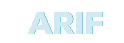
<style>
.page{position:relative;width:124px;height:43px;background:#ffffff}
.page>*{position:absolute;margin:0}
.t1{font:30px "NexaW01-Black";color:#cfeaf3}
</style>
<div class="page">
<p class="t1" style="left:28px;top:12px;width:74px;height:22px">ARIF</p>
<p class="t1" style="left:29px;top:12px;width:74px;height:22px">ARIF</p>
</div>
